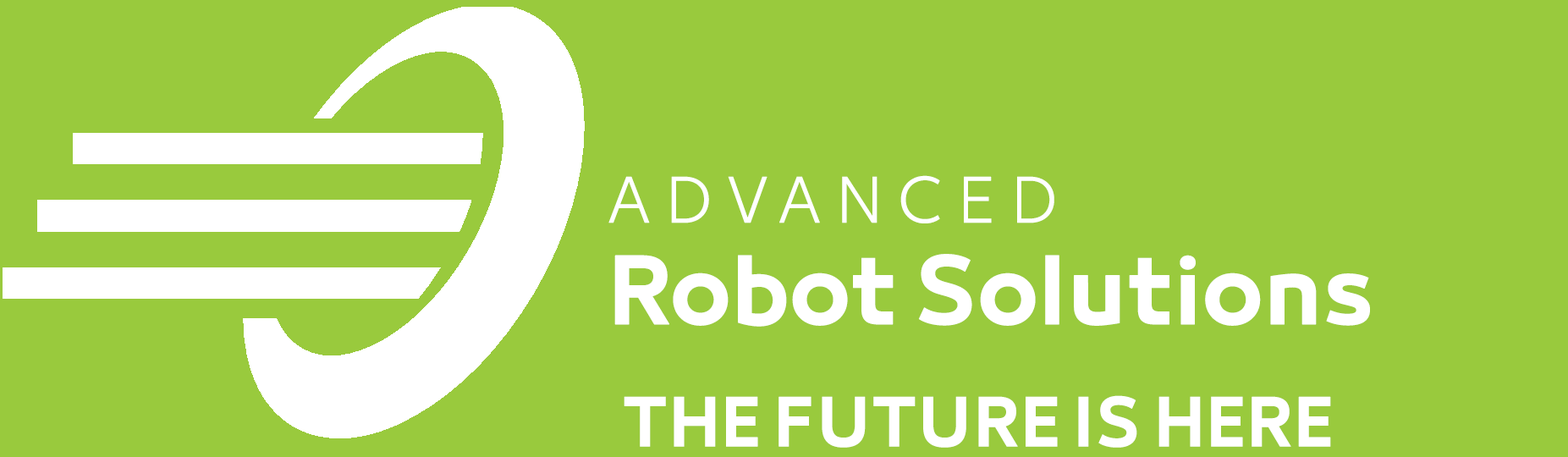
<style>
.page{position:relative;width:1568px;height:457px;background:#99ca3d}
.page>*{position:absolute;margin:0}
.t1{font:84.6px "29LTBukra-SmBd";color:#ffffff;font-weight:bold}
.t2{font:56.4px "29LTBukra-Lt";letter-spacing:0.24em;color:#ffffff;font-weight:bold}
.t3{font:61.1px "29LTBukra-SmBd";color:#ffffff;font-weight:bold}
</style>
<div class="page">
<p class="t1" style="left:608px;top:175px;width:762px;height:152px"><span class="t2">ADVANCED <br></span>Robot Solutions</p>
<p class="t3" style="left:624px;top:395px;width:707px;height:53px">THE FUTURE IS HERE</p>
</div>
